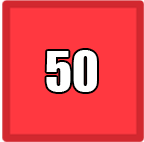
<style>
.page{position:relative;width:144px;height:142px;background:#ff3840}
.page>*{position:absolute;margin:0}
.t1{font:50px "Impact";color:#ffffff}
</style>
<div class="page">
<p class="t1" style="left:46px;top:50px;width:51px;height:42px">50</p>
</div>
